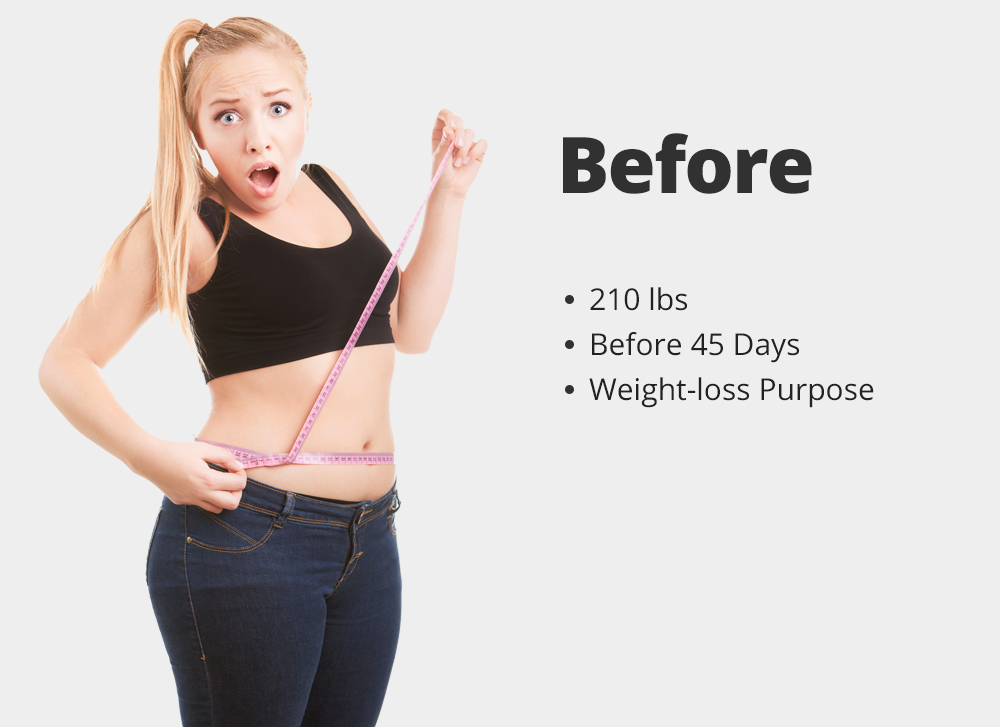
<style>
.page{position:relative;width:1000px;height:727px;background:#eeeeee}
.page>*{position:absolute;margin:0}
.t1{font:78px "OpenSans-Extrabold";letter-spacing:-0.025em;color:#313131}
.t2{font:30px/45px "OpenSans";color:#222222}
</style>
<div class="page">
<p class="t1" style="left:563px;top:133px;width:249px;height:61px">Before</p>
<p class="t2" style="left:589px;top:287px;width:285px;height:121px">210 lbs<br>Before 45 Days<br>Weight-loss Purpose</p>
</div>
